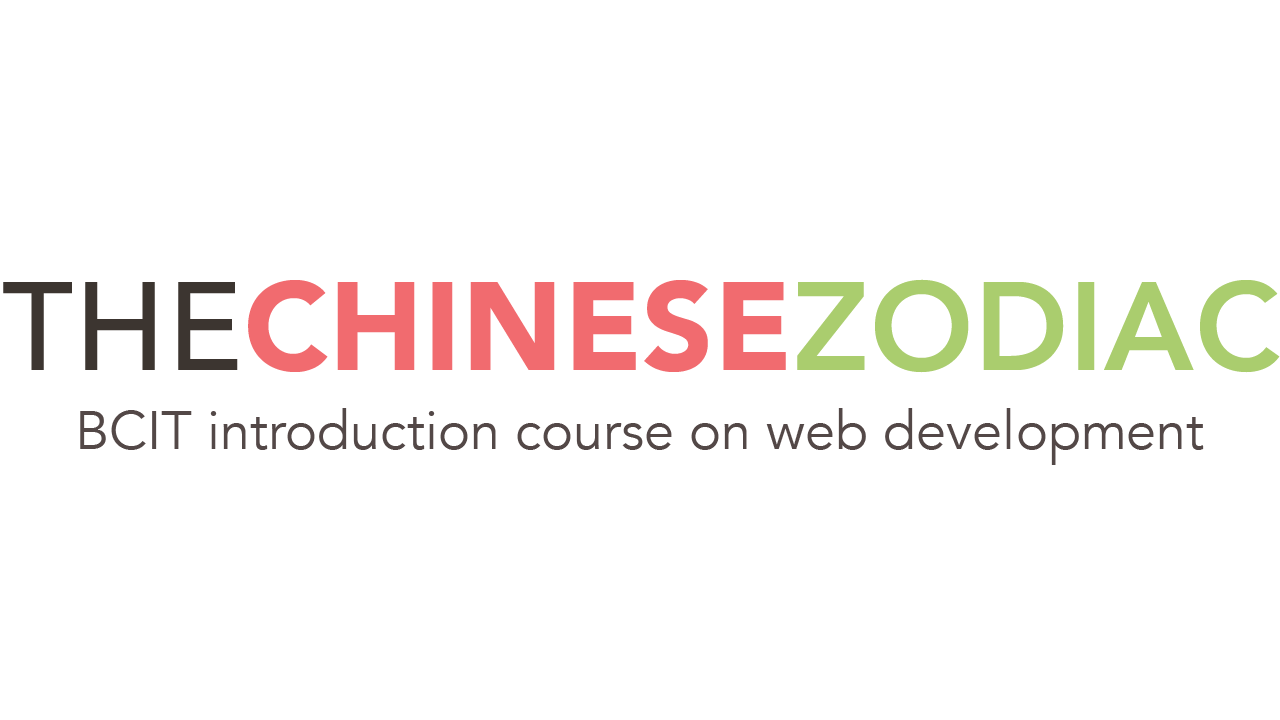
<style>
.page{position:relative;width:1280px;height:720px;background:#ffffff}
.page>*{position:absolute;margin:0}
.t1{font:124.3px "Avenir-Black";letter-spacing:0.005em;color:#f16b6f}
.t2{font:124.3px "Avenir-Medium";letter-spacing:0.005em;color:#3c3530}
.t3{font:124.3px "Avenir-Heavy";letter-spacing:0.005em;color:#aacd6e}
.t4{font:53.5px "Avenir-Book";letter-spacing:0.005em;color:#534847}
</style>
<div class="page">
<p class="t1" style="left:3px;top:279px;width:1277px;height:94px"><span class="t2">THE</span>CHINESE<span class="t3">ZODIAC</span></p>
<p class="t4" style="left:80px;top:408px;width:1124px;height:57px">BCIT introduction course on web development</p>
</div>
